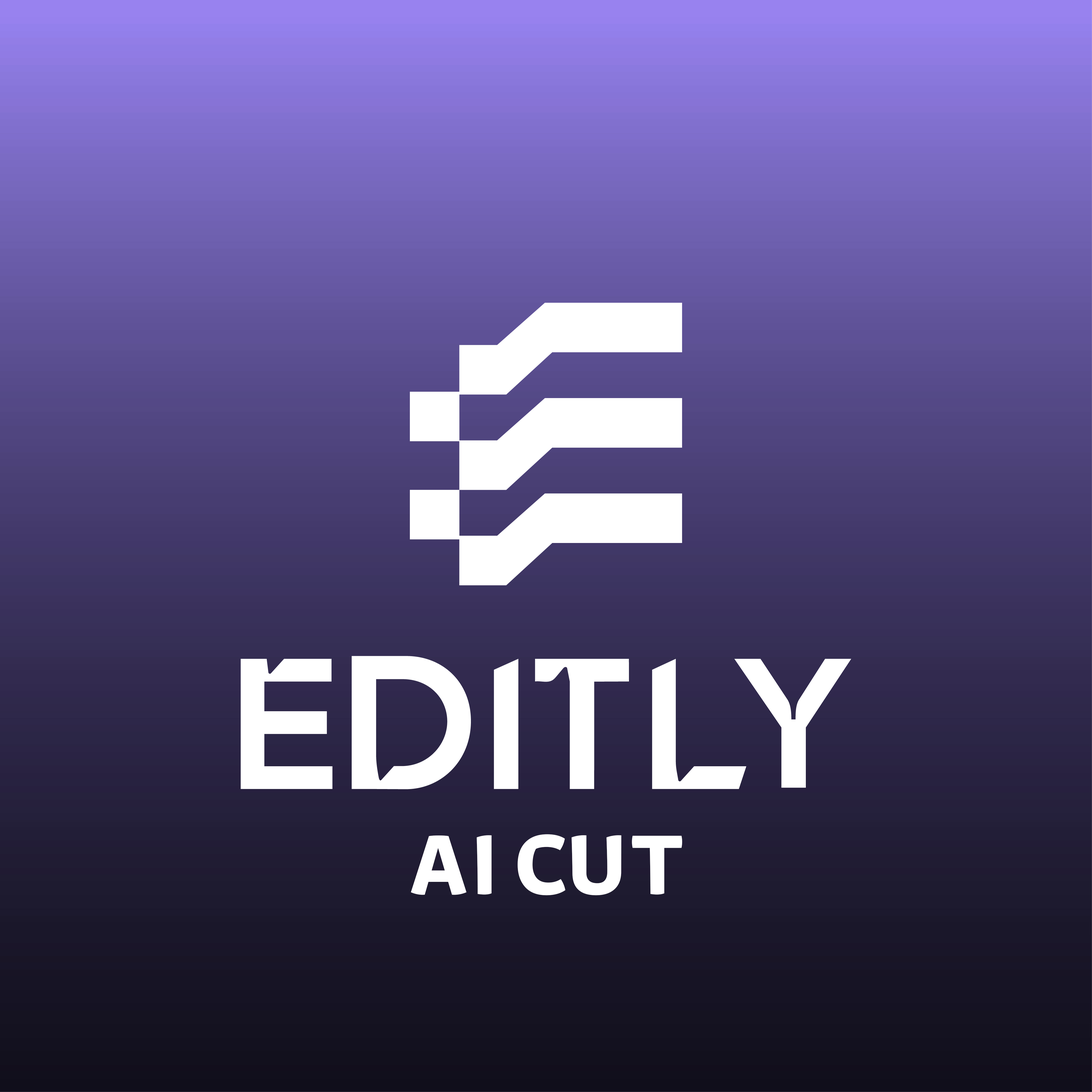
<style>
.page{position:relative;width:1092px;height:1092px}
.page>*{position:absolute;margin:0}
.t1{font:106.1px "29LTAzer-Bold";color:#ffffff;text-transform:uppercase}
</style>
<div class="page">
<p class="t1" style="left:411px;top:834px;width:271px;height:61px">AI CUT</p>
</div>
